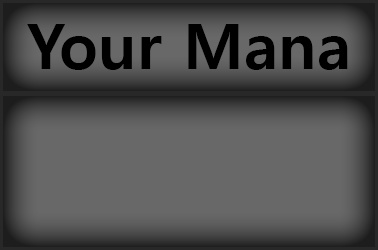
<style>
.page{position:relative;width:378px;height:250px;background:#686868}
.page>*{position:absolute;margin:0}
.t1{font:63px "MalgunGothicBold";color:#000000}
</style>
<div class="page">
<p class="t1" style="left:27px;top:24px;width:321px;height:46px">Your Mana</p>
</div>
